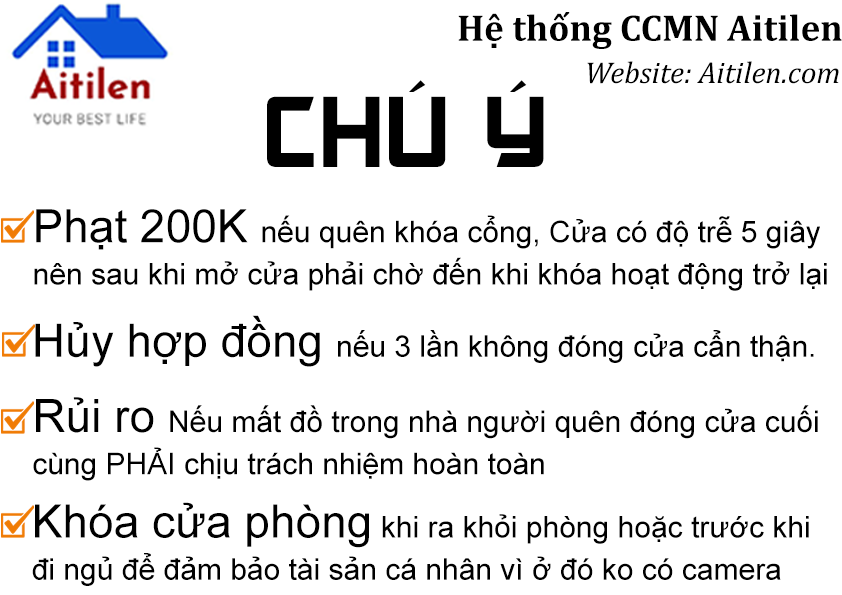
<style>
.page{position:relative;width:842px;height:595px;background:#ffffff}
.page>*{position:absolute;margin:0}
.t1{font:37.4px "Cambria-Bold";color:#000000}
.t2{font:30.5px "Cambria-Italic";color:#000000}
.t3{font:96px "UTM-Akashi";color:#000000}
.t4{font:30px/14.1px "ArialMT";color:#000000}
.t5{font:46.1px/14.1px "ArialMT";color:#000000}
.t6{font:30px "ArialMT";color:#000000}
.t7{font:46.1px "ArialMT";color:#000000}
</style>
<div class="page">
<p class="t1" style="left:458px;top:12px;width:384px;height:37px">Hệ thống CCMN Aitilen</p>
<p class="t2" style="left:587px;top:61px;width:252px;height:23px">Website: Aitilen.com</p>
<p class="t3" style="left:267px;top:80px;width:277px;height:87px">CHÚ Ý</p>
<p class="t4" style="left:34px;top:209px;width:793px;height:82px"><span class="t5">Phạt 200K </span>nếu quên khóa cổng, Cửa có độ trễ 5 giây<br><br><br>nên sau khi mở cửa phải chờ đến khi khóa hoạt động trở lại</p>
<p class="t6" style="left:35px;top:315px;width:779px;height:52px"><span class="t7">Hủy hợp đồng </span>nếu 3 lần không đóng cửa cẩn thận.</p>
<p class="t4" style="left:33px;top:397px;width:785px;height:84px"><span class="t5">Rủi ro </span>Nếu mất đồ trong nhà người quên đóng cửa cuối<br><br><br>cùng PHẢI chịu trách nhiệm hoàn toàn</p>
<p class="t4" style="left:32px;top:502px;width:777px;height:84px"><span class="t5">Khóa cửa phòng</span> khi ra khỏi phòng hoặc trước khi <br><br><br>đi ngủ để đảm bảo tài sản cá nhân vì ở đó ko có camera</p>
</div>
